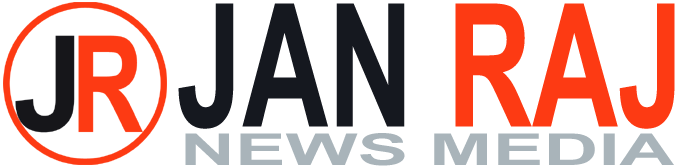
<style>
.page{position:relative;width:676px;height:167px;background:#ffffff}
.page>*{position:absolute;margin:0}
.t1{font:171.3px "Arial-BoldMT";color:#15181f;scale:0.69 1}
.t2{font:171.3px "Arial-BoldMT";color:#fd3a13;scale:0.69 1}
.t3{font:43.7px "Arial-BoldMT";color:#a9b4ba;scale:1.74 1}
</style>
<div class="page">
<p class="t1" style="left:178px;top:3px;width:497px;height:126px">JAN <span class="t2">RAJ</span></p>
<p class="t3" style="left:185px;top:133px;width:489px;height:33px">NEWS MEDIA</p>
</div>
